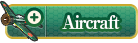
<style>
.page{position:relative;width:138px;height:43px;background:#ffffff}
.page>*{position:absolute;margin:0}
.t1{font:18px "RyuminPro-ExBold";letter-spacing:-0.08em;color:#ffffff;scale:0.9 1}
</style>
<div class="page">
<p class="t1" style="left:62px;top:15px;width:58px;height:14px">Aircraft</p>
</div>
